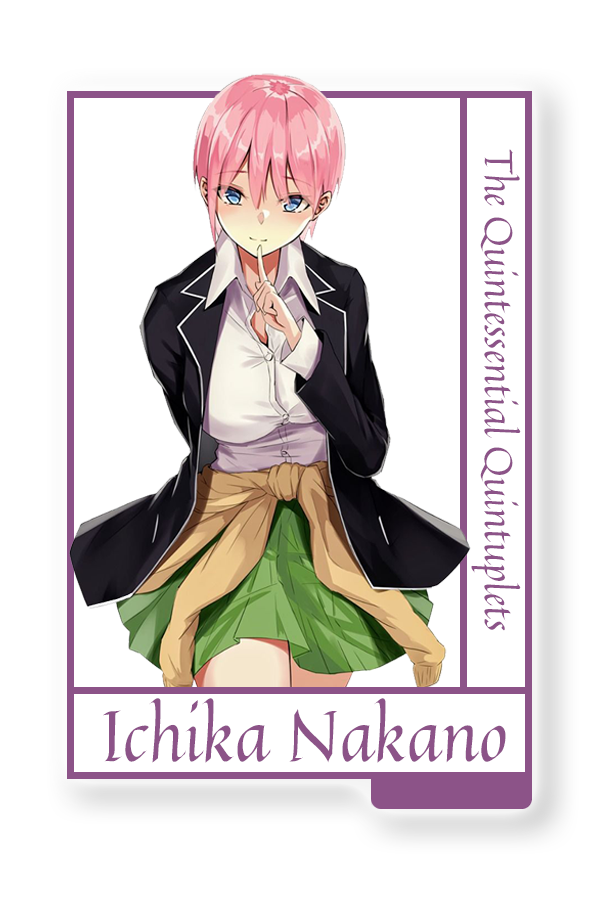
<style>
.page{position:relative;width:600px;height:900px;background:#ffffff}
.page>*{position:absolute;margin:0}
.t1{font:39px "Quintessential-Regular";color:#8c5388}
.t2{font:70.1px "Quintessential-Regular";color:#8c5388}
</style>
<div class="page">
<p class="t1" style="left:471px;top:149px;width:50px;height:482px;rotate:90deg">The Quintessential Quintuplets</p>
<p class="t2" style="left:103px;top:698px;width:403px;height:65px">Ichika Nakano</p>
</div>
